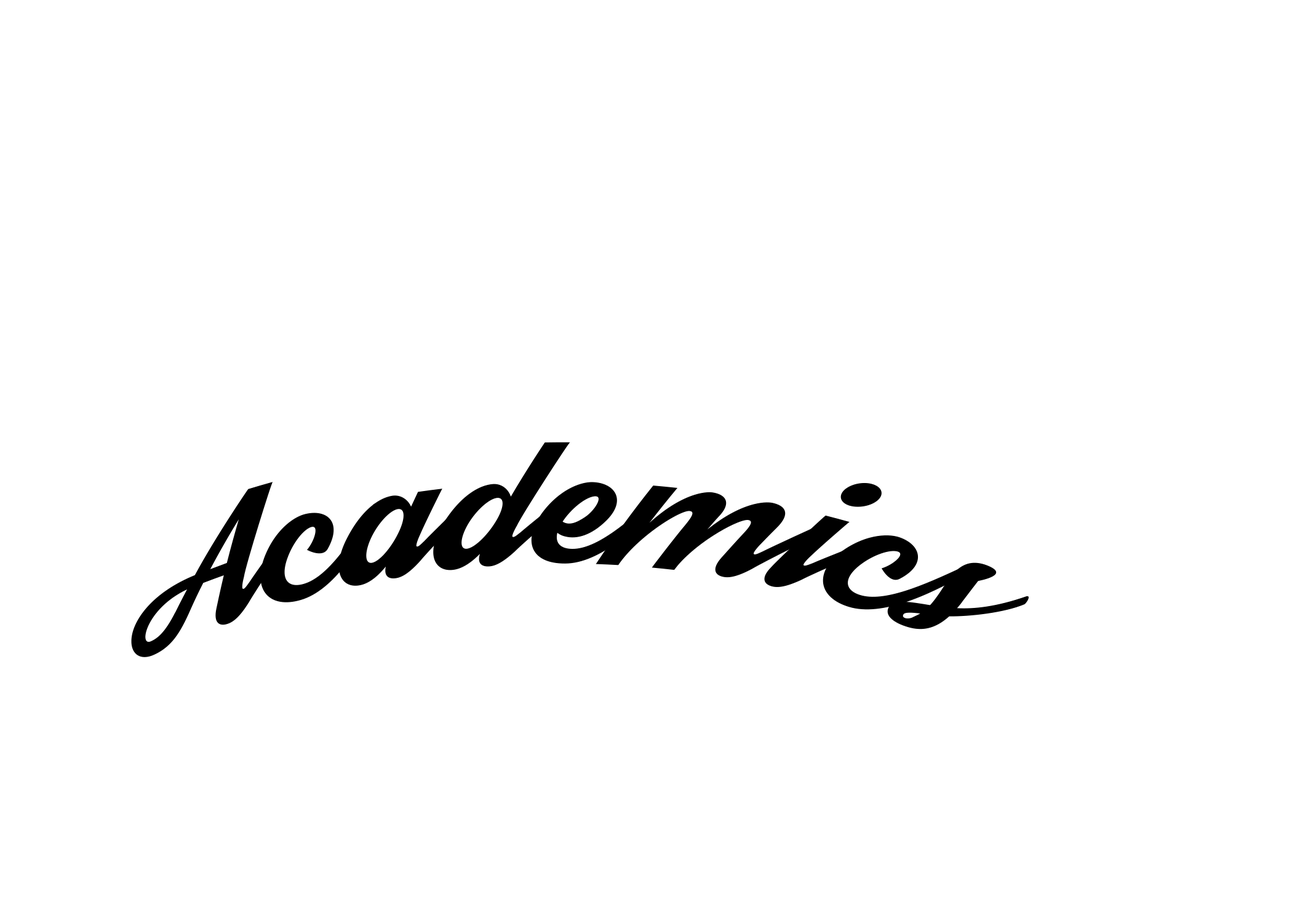
<style>
.page{position:relative;width:1292px;height:923px;background:#ffffff}
.page>*{position:absolute;margin:0}
.t1{font:123.1px "Streetwear";color:#000000}
</style>
<div class="page">
<p class="t1" style="left:131px;top:442px;width:898px;height:215px">Academics</p>
</div>
